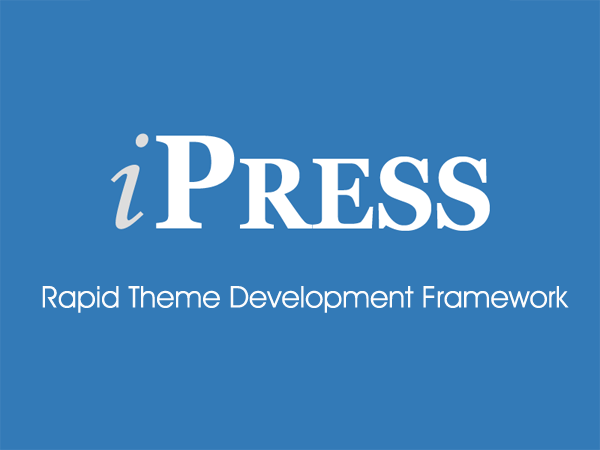
<style>
.page{position:relative;width:600px;height:450px;background:#337ab7}
.page>*{position:absolute;margin:0}
.t1{font:30px "Decker-Regular";color:#fcfcfc}
</style>
<div class="page">
<p class="t1" style="left:42px;top:286px;width:527px;height:27px">Rapid Theme Development Framework</p>
</div>
